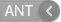
<style>
.page{position:relative;width:61px;height:22px;background:#a4a4a4}
.page>*{position:absolute;margin:0}
.t1{font:16px "MyriadPro-Regular";color:#f4f3f3}
</style>
<div class="page">
<p class="t1" style="left:4px;top:5px;width:29px;height:11px">ANT</p>
</div>
